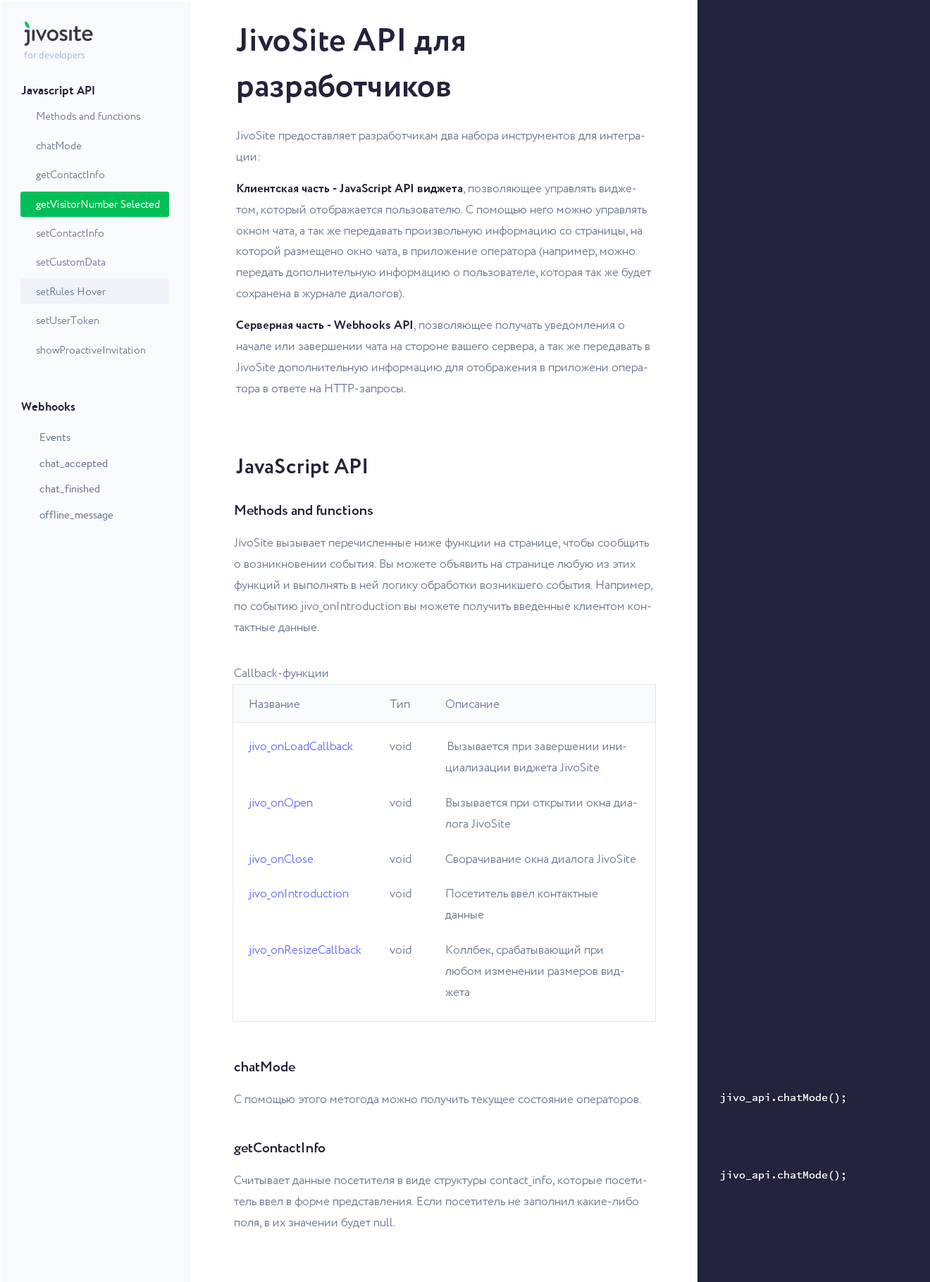
<style>
.page{position:relative;width:930px;height:1282px;background:#ffffff}
.page>*{position:absolute;margin:0}
.t1{font:32.4px/45.8px "Circe-Bold";color:#23233b}
.t2{font:9.9px "BrandonText-Regular";color:#aec1dc}
.t3{font:12px "BrandonText-Bold";color:#23233b}
.t4{font:10.6px/18.6px "Circe-Light";color:#6b7b93}
.t5{font:10.6px/18.6px "Circe-Light";color:#ffffff}
.t6{font:12px/21.1px "Circe-Light";color:#6b7b93}
.t7{font:12px/21.1px "Circe-Bold";color:#23233b}
.t8{font:10.6px/18.6px "BrandonText-Regular";color:#6b7b93}
.t9{font:21.1px "Circe-Bold";color:#23233b}
.t10{font:14.1px/24.8px "Circe-Bold";color:#23233b}
.t11{font:12px/21.1px "Circe-Light";color:#676cff}
.t12{font:10.6px "SourceCodePro-Regular";color:#ffffff}
</style>
<div class="page">
<p class="t1" style="left:236px;top:27px;width:228px;height:76px">JivoSite API для <br>разработчиков</p>
<p class="t2" style="left:24px;top:51px;width:61px;height:10px">for developers</p>
<p class="t3" style="left:21px;top:86px;width:73px;height:11px">Javascript API</p>
<p class="t4" style="left:36px;top:112px;width:123px;height:242px">Methods and functions<br>chatMode<br>getContactInfo<br><span class="t5">getVisitorNumber Selected<br></span>setContactInfo<br>setCustomData<br>setRules Hover<br>setUserToken<br>showProactiveInvitation</p>
<p class="t6" style="left:236px;top:131px;width:416px;height:264px">JivoSite предоставляет разработчикам два набора инструментов для интеграции:<br><span class="t7">Клиентская часть - JavaScript API виджета</span>, позволяющее управлять виджетом, который отображается пользователю. С помощью него можно управлять окном чата, а так же передавать произвольную информацию со страницы, на которой размещено окно чата, в приложение оператора (например, можно передать дополнительную информацию о пользователе, которая так же будет сохранена в журнале диалогов).<br><span class="t7">Серверная часть - Webhooks API</span>, позволяющее получать уведомления о начале или завершении чата на стороне вашего сервера, а так же передавать в JivoSite дополнительную информацию для отображения в приложени оператора в ответе на HTTP-запросы.</p>
<p class="t3" style="left:21px;top:402px;width:54px;height:9px">Webhooks</p>
<p class="t8" style="left:39px;top:433px;width:74px;height:88px">Events<br>chat_accepted<br>chat_finished<br>offline_message</p>
<p class="t9" style="left:236px;top:459px;width:130px;height:19px">JavaScript API</p>
<p class="t6" style="left:234px;top:505px;width:418px;height:174px"><span class="t10">Methods and functions<br></span>JivoSite вызывает перечисленные ниже функции на странице, чтобы сообщить о возникновении события. Вы можете объявить на странице любую из этих функций и выполнять в ней логику обработки возникшего события. Например, по событию jivo_onIntroduction вы можете получить введенные клиентом контактные данные.<br>Сallback-функции</p>
<p class="t11" style="left:247px;top:700px;width:114px;height:256px"><span class="t6">Название   <br></span>jivo_onLoadCallback <br><br>jivo_onOpen   <br><br>jivo_onClose   <br>jivo_onIntroduction  <br><br>jivo_onResizeCallback</p>
<p class="t6" style="left:390px;top:700px;width:21px;height:254px">Тип  <br>void  <br><br>void  <br><br>void  <br>void  <br><br>void</p>
<p class="t6" style="left:445px;top:700px;width:192px;height:296px">Описание<br>Вызывается при завершении инициализации виджета JivoSite<br>Вызывается при открытии окна диалога JivoSite<br>Сворачивание окна диалога JivoSite<br>Посетитель ввёл контактные данные<br>Коллбек, срабатывающий при любом изменении размеров виджета</p>
<p class="t6" style="left:234px;top:1062px;width:407px;height:43px"><span class="t10">chatMode<br></span>С помощью этого метогода можно получить текущее состояние операторов.</p>
<p class="t12" style="left:720px;top:1093px;width:125px;height:11px">jivo_api.chatMode();</p>
<p class="t6" style="left:234px;top:1143px;width:413px;height:86px"><span class="t10">getContactInfo<br></span>Считывает данные посетителя в виде структуры contact_info, которые посетитель ввел в форме представления. Если посетитель не заполнил какие-либо поля, в их значении будет null.</p>
<p class="t12" style="left:720px;top:1171px;width:125px;height:10px">jivo_api.chatMode();</p>
</div>
